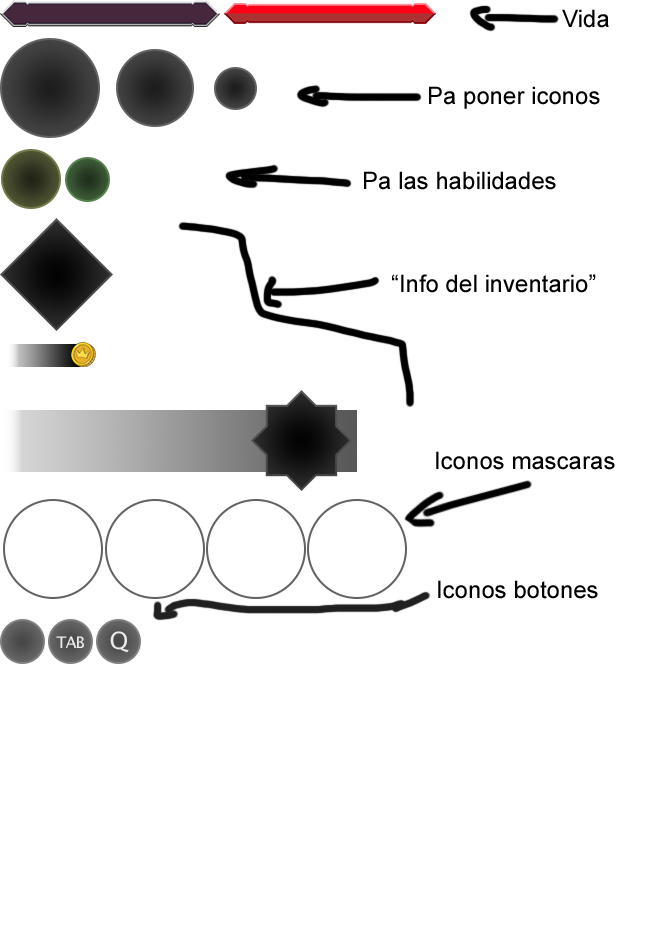
<style>
.page{position:relative;width:653px;height:929px;background:#ffffff}
.page>*{position:absolute;margin:0}
.t1{font:24px "ArialMT";color:#000000}
.t2{font:16px "LucidaSansUnicode";letter-spacing:-0.06em;color:#ebebeb}
.t3{font:24px "LucidaSansUnicode";letter-spacing:-0.06em;color:#ebebeb}
</style>
<div class="page">
<p class="t1" style="left:562px;top:9px;width:47px;height:19px">Vida</p>
<p class="t1" style="left:429px;top:86px;width:171px;height:23px">Pa poner iconos</p>
<p class="t1" style="left:364px;top:171px;width:192px;height:19px">Pa las habilidades</p>
<p class="t1" style="left:392px;top:274px;width:204px;height:19px">“Info del inventario”</p>
<p class="t1" style="left:436px;top:451px;width:179px;height:19px">Iconos mascaras</p>
<p class="t1" style="left:438px;top:580px;width:160px;height:19px">Iconos botones</p>
<p class="t2" style="left:56px;top:636px;width:28px;height:12px">TAB</p>
<p class="t3" style="left:110px;top:631px;width:19px;height:22px">Q</p>
</div>
